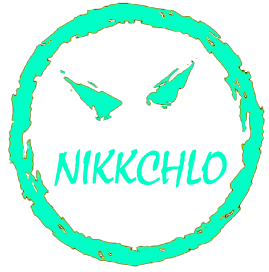
<style>
.page{position:relative;width:269px;height:272px;background:#ffffff}
.page>*{position:absolute;margin:0}
.t1{font:49.6px "Mistral";color:#00ffc6;text-transform:uppercase}
</style>
<div class="page">
<p class="t1" style="left:54px;top:149px;width:173px;height:39px">NIKKCHLO</p>
</div>
